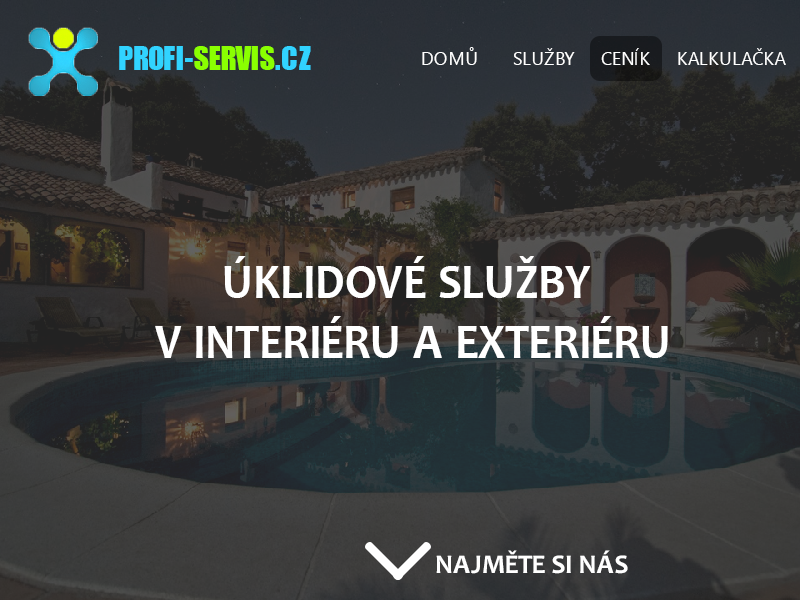
<style>
.page{position:relative;width:800px;height:600px}
.page>*{position:absolute;margin:0}
.t1{font:30.2px "Impact";color:#31d3ff}
.t2{font:30.2px "Impact";color:#8aff01}
.t3{font:19px "SegoeUI";color:#ffffff;scale:0.97 1}
.t4{font:50.4px "Candara-Bold";color:#ffffff;scale:0.92 1}
.t5{font:27.2px "Candara-Bold";color:#ffffff}
</style>
<div class="page">
<p class="t1" style="left:119px;top:46px;width:192px;height:24px">PROFI-<span class="t2">SERVIS</span>.CZ</p>
<p class="t3" style="left:422px;top:47px;width:55px;height:18px">DOMŮ</p>
<p class="t3" style="left:513px;top:48px;width:62px;height:17px">SLUŽBY</p>
<p class="t3" style="left:601px;top:48px;width:49px;height:17px">CENÍK</p>
<p class="t3" style="left:678px;top:48px;width:108px;height:17px">KALKULAČKA</p>
<p class="t4" style="left:155px;top:256px;width:513px;height:102px;text-align:center">ÚKLIDOVÉ SLUŽBY<br> V INTERIÉRU A EXTERIÉRU</p>
<p class="t5" style="left:436px;top:550px;width:192px;height:24px">NAJMĚTE SI NÁS</p>
</div>
